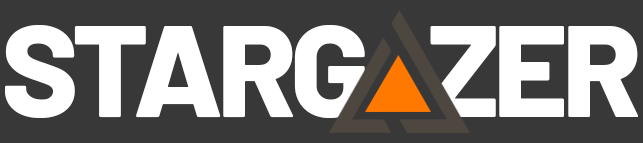
<style>
.page{position:relative;width:643px;height:143px;background:#383838}
.page>*{position:absolute;margin:0}
.t1{font:130px "Barlow-ExtraBold";letter-spacing:-0.05em;color:#ffffff}
</style>
<div class="page">
<p class="t1" style="left:4px;top:25px;width:361px;height:93px">STARG</p>
<p class="t1" style="left:430px;top:26px;width:209px;height:91px">ZER</p>
</div>
